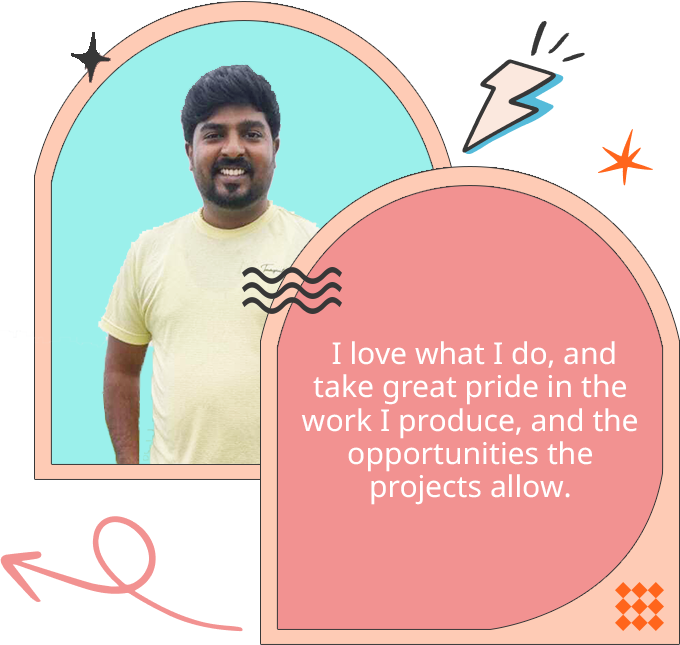
<style>
.page{position:relative;width:680px;height:645px;background:#f29291}
.page>*{position:absolute;margin:0}
.t1{font:30px/33.4px "NotoSansTamil-Regular";color:#ffffff}
</style>
<div class="page">
<p class="t1" style="left:301px;top:341px;width:336px;height:164px;text-align:center">I love what I do, and take great pride in the work I produce, and the opportunities the<br>projects allow.</p>
</div>
